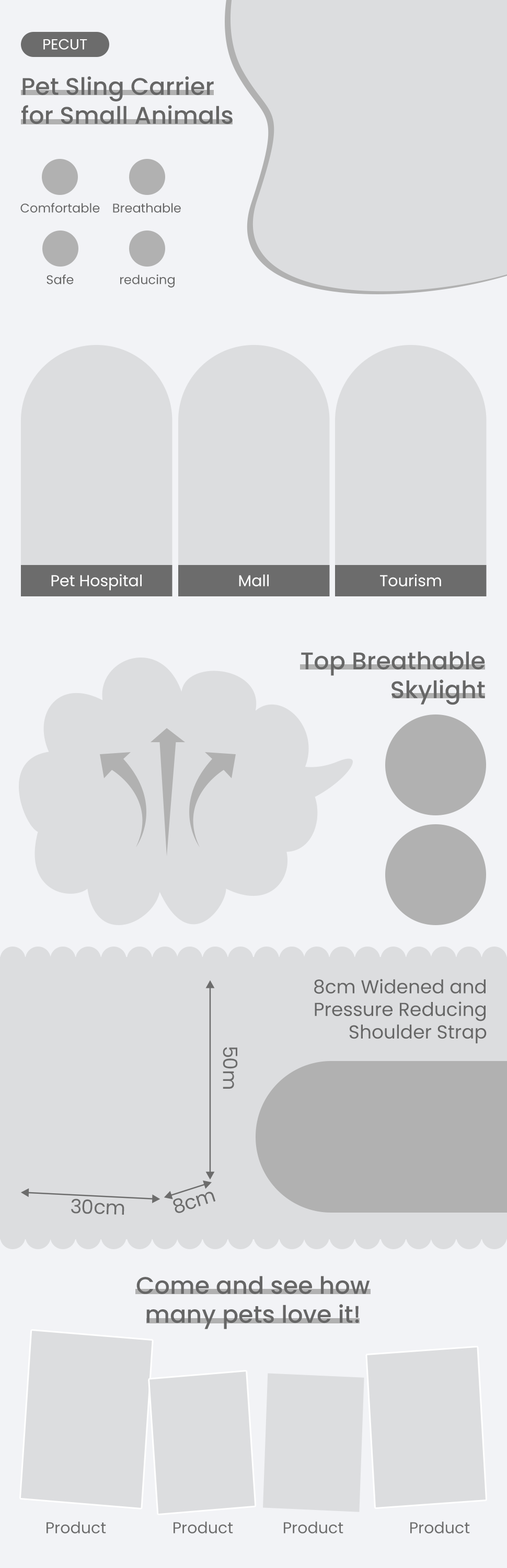
<style>
.page{position:relative;width:507px;height:1568px;background:#dcdddf}
.page>*{position:absolute;margin:0}
.t1{font:14.6px "Poppins-Regular";color:#ffffff}
.t2{font:24px "Poppins-Medium";color:#666666}
.t3{font:12.5px "Poppins-Regular";color:#666666}
.t4{font:15.7px "Poppins-Regular";color:#ffffff}
.t5{font:18.8px "Poppins-Regular";color:#666666}
.t6{font:19.6px "Poppins-Regular";color:#6c6c6c}
.t7{font:15.7px "Poppins-Regular";color:#6c6c6c}
</style>
<div class="page">
<p class="t1" style="left:43px;top:39px;width:44px;height:11px">PECUT</p>
<p class="t2" style="left:21px;top:76px;width:212px;height:48px">Pet Sling Carrier<br>for Small Animals</p>
<p class="t3" style="left:20px;top:203px;width:80px;height:10px">Comfortable</p>
<p class="t3" style="left:113px;top:203px;width:68px;height:10px">Breathable</p>
<p class="t3" style="left:47px;top:274px;width:27px;height:10px">Safe</p>
<p class="t3" style="left:120px;top:274px;width:55px;height:13px">reducing</p>
<p class="t4" style="left:51px;top:574px;width:91px;height:17px">Pet Hospital</p>
<p class="t4" style="left:239px;top:574px;width:30px;height:12px">Mall</p>
<p class="t4" style="left:380px;top:574px;width:61px;height:12px">Tourism</p>
<p class="t2" style="left:301px;top:651px;width:184px;height:54px;text-align:right">Top Breathable<br>Skylight</p>
<p class="t5" style="left:314px;top:979px;width:173px;height:65px;text-align:right">8cm Widened and<br>Pressure Reducing<br>Shoulder Strap</p>
<p class="t6" style="left:223px;top:1047px;width:15px;height:42px;rotate:90deg">50m</p>
<p class="t6" style="left:173px;top:1192px;width:43px;height:21px;rotate:-18deg">8cm</p>
<p class="t6" style="left:71px;top:1198px;width:53px;height:17px;rotate:2deg">30cm</p>
<p class="t2" style="left:136px;top:1276px;width:234px;height:53px;text-align:center">Come and see how<br>many pets love it!</p>
<p class="t7" style="left:47px;top:1521px;width:59px;height:13px">Product</p>
<p class="t7" style="left:174px;top:1521px;width:59px;height:13px">Product</p>
<p class="t7" style="left:284px;top:1521px;width:59px;height:13px">Product</p>
<p class="t7" style="left:410px;top:1521px;width:60px;height:13px">Product</p>
</div>
